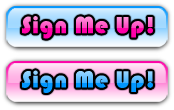
<style>
.page{position:relative;width:174px;height:110px}
.page>*{position:absolute;margin:0}
.t1{font:24px "Bauhaus93";letter-spacing:0.032em}
</style>
<div class="page">
<p class="t1" style="left:22px;top:16px;width:131px;height:23px">Sign Me Up!</p>
<p class="t1" style="left:22px;top:70px;width:131px;height:23px">Sign Me Up!</p>
</div>
